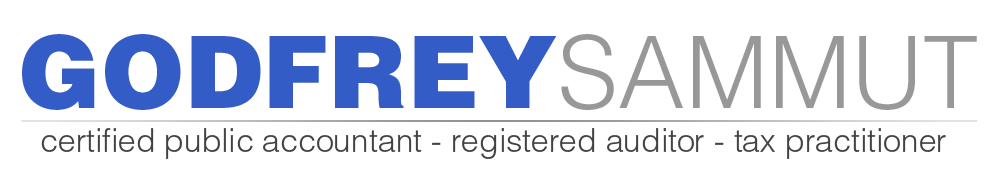
<style>
.page{position:relative;width:1000px;height:170px;background:#ffffff}
.page>*{position:absolute;margin:0}
.t1{font:100px "HelveticaLTStd-Blk";color:#335cc6}
.t2{font:100px "HelveticaLTStd-Light";color:#989898}
.t3{font:32px "HelveticaLTStd-Light";color:#424242}
</style>
<div class="page">
<p class="t1" style="left:22px;top:34px;width:955px;height:76px">GODFREY<span class="t2">SAMMUT</span></p>
<p class="t3" style="left:41px;top:128px;width:905px;height:31px">certified public accountant - registered auditor - tax practitioner</p>
</div>
